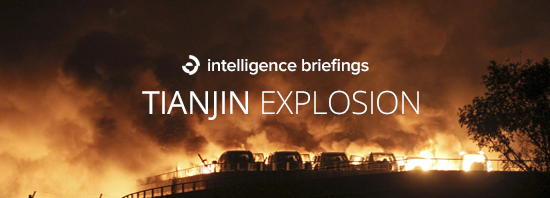
<style>
.page{position:relative;width:550px;height:198px}
.page>*{position:absolute;margin:0}
.t1{font:18px "ProximaNova-Semibold";letter-spacing:-0.015em;color:#ffffff}
.t2{font:32px "OpenSans-Light";letter-spacing:-0.015em;color:#ffffff}
.t3{font:32px "OpenSans";letter-spacing:-0.015em;color:#ffffff}
</style>
<div class="page">
<p class="t1" style="left:208px;top:58px;width:161px;height:17px">intelligence briefings</p>
<p class="t2" style="left:142px;top:90px;width:277px;height:30px"><span class="t3">TIANJIN </span>EXPLOSION</p>
</div>
